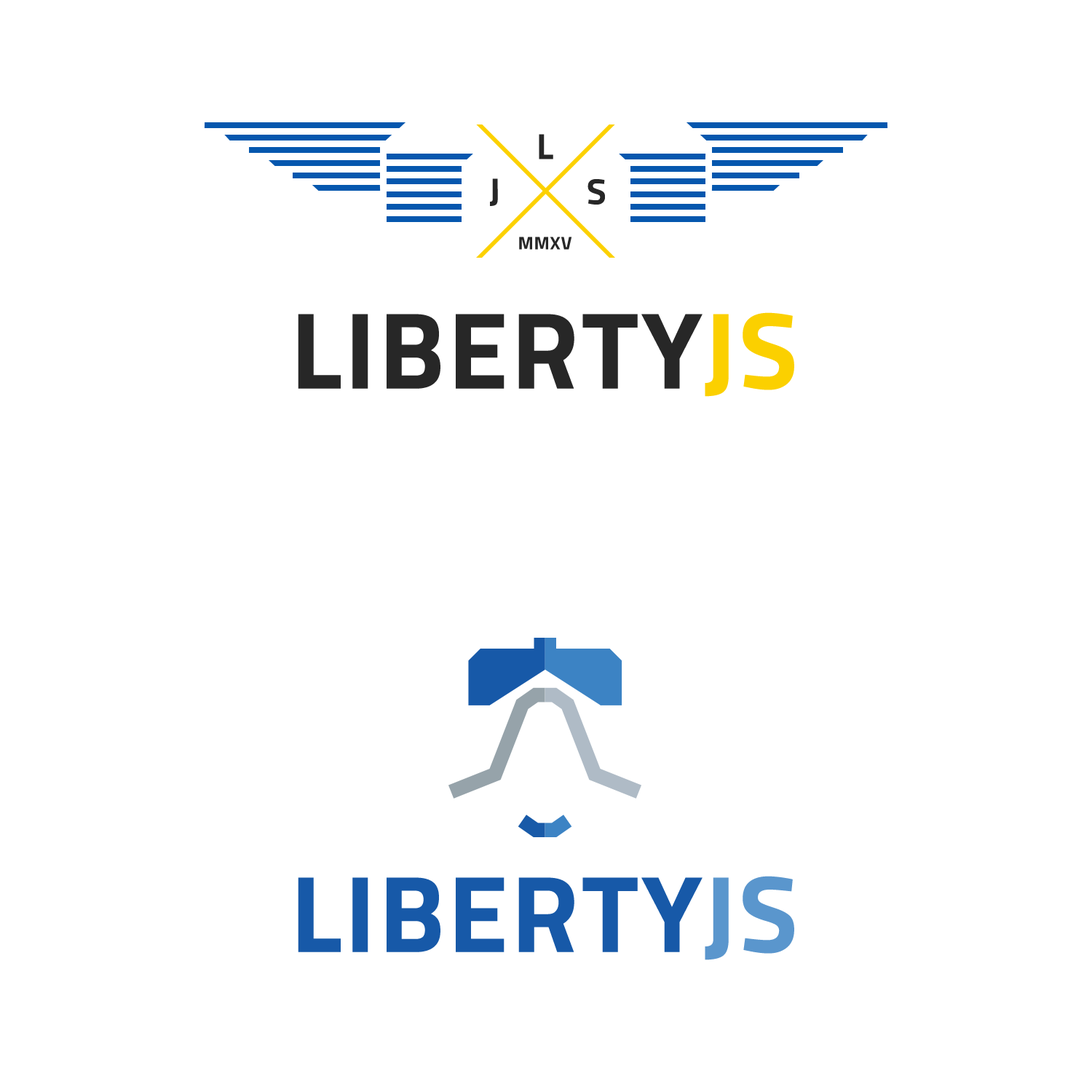
<style>
.page{position:relative;width:1092px;height:1092px;background:#ffffff}
.page>*{position:absolute;margin:0}
.t1{font:36.4px "TitilliumWeb-Bold";letter-spacing:0.025em;color:#272727;text-transform:uppercase}
.t2{font:18.2px "TitilliumWeb-Bold";letter-spacing:0.025em;color:#272727;text-transform:uppercase}
.t3{font:109.2px "TitilliumWeb-Bold";letter-spacing:0.025em;color:#272727;text-transform:uppercase}
.t4{font:109.2px "TitilliumWeb-Bold";letter-spacing:0.025em;color:#fbd000;text-transform:uppercase}
.t5{font:109.2px "TitilliumWeb-Bold";letter-spacing:0.025em;color:#1759a8;text-transform:uppercase}
.t6{font:109.2px "TitilliumWeb-Bold";letter-spacing:0.025em;color:#5a96cd;text-transform:uppercase}
</style>
<div class="page">
<p class="t1" style="left:539px;top:134px;width:14px;height:25px">L</p>
<p class="t1" style="left:490px;top:178px;width:8px;height:28px">J</p>
<p class="t1" style="left:587px;top:179px;width:18px;height:26px">S</p>
<p class="t2" style="left:519px;top:237px;width:53px;height:13px">MMXV</p>
<p class="t3" style="left:298px;top:312px;width:496px;height:85px">Liberty<span class="t4">JS</span></p>
<p class="t5" style="left:298px;top:876px;width:496px;height:84px">Liberty<span class="t6">JS</span></p>
</div>
